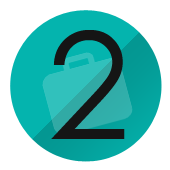
<style>
.page{position:relative;width:170px;height:170px;background:#ffffff}
.page>*{position:absolute;margin:0}
.t1{font:148.5px "CenturyGothic";letter-spacing:-0.025em;color:#151515}
</style>
<div class="page">
<p class="t1" style="left:51px;top:30px;width:74px;height:109px">2</p>
</div>
